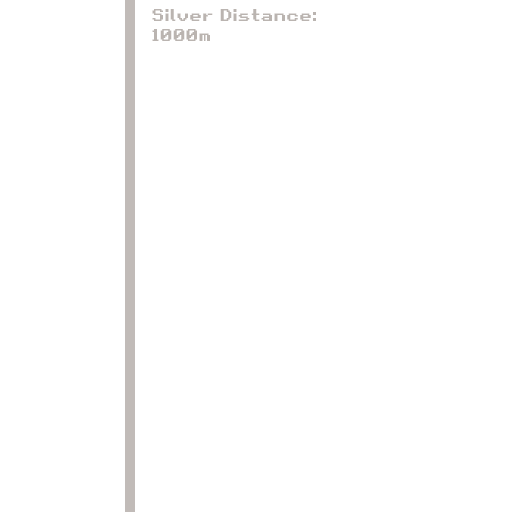
<style>
.page{position:relative;width:512px;height:512px;background:#ffffff}
.page>*{position:absolute;margin:0}
.t1{font:16.7px "RetroGaming";color:#bab4b0}
</style>
<div class="page">
<p class="t1" style="left:152px;top:9px;width:164px;height:32px">Silver Distance:<br>1000m</p>
</div>
